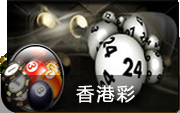
<style>
.page{position:relative;width:180px;height:113px}
.page>*{position:absolute;margin:0}
.t1{font:18px "MicrosoftYaHei";letter-spacing:0.1em;color:#fcfbfb;font-weight:bold}
</style>
<div class="page">
<p class="t1" style="left:76px;top:85px;width:59px;height:18px">香港彩</p>
</div>
